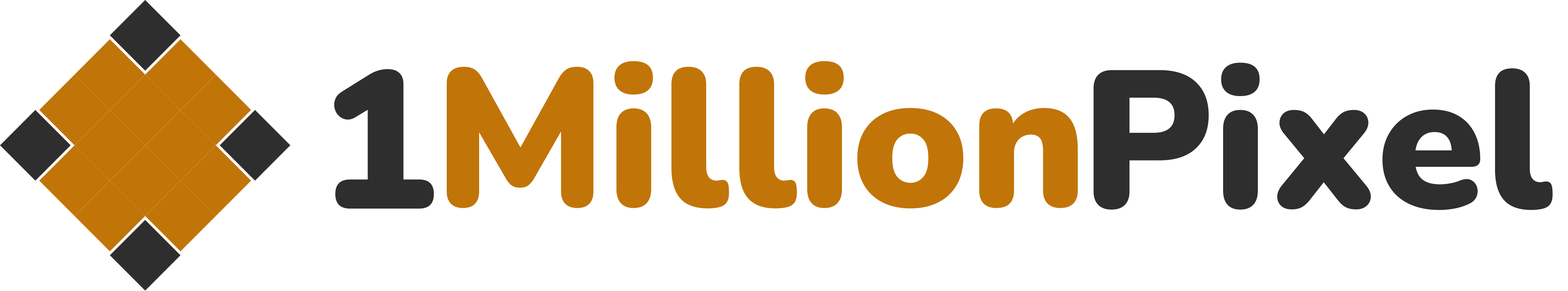
<style>
.page{position:relative;width:1568px;height:291px;background:#ffffff}
.page>*{position:absolute;margin:0}
.t1{font:195.1px "Nunito-Black";color:#c17508}
.t2{font:195.1px "Nunito-Black";color:#2e2e2e}
</style>
<div class="page">
<p class="t1" style="left:447px;top:61px;width:631px;height:147px">Million</p>
<p class="t2" style="left:1094px;top:62px;width:459px;height:148px">Pixel</p>
<p class="t2" style="left:334px;top:69px;width:100px;height:139px">1</p>
</div>
